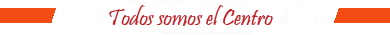
<style>
.page{position:relative;width:390px;height:35px;background:#ffffff}
.page>*{position:absolute;margin:0}
.t1{font:24px "Pristina-Regular";color:#c1252b}
</style>
<div class="page">
<p class="t1" style="left:109px;top:5px;width:164px;height:21px">Todos somos el Centro</p>
</div>
